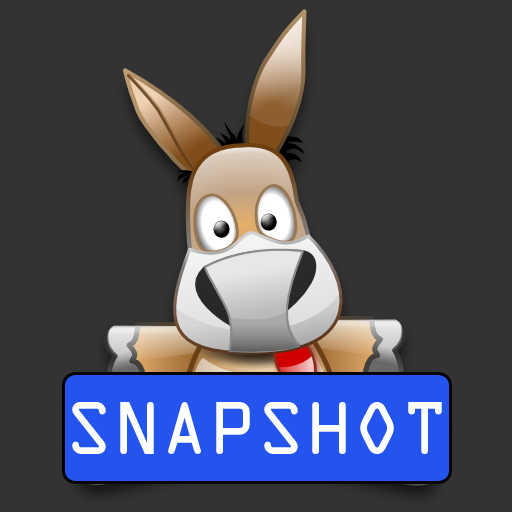
<style>
.page{position:relative;width:512px;height:512px;background:#333333}
.page>*{position:absolute;margin:0}
.t1{font:66.7px "OCRAStd";color:#fefefe}
</style>
<div class="page">
<p class="t1" style="left:72px;top:402px;width:370px;height:52px">SNAPSHOT</p>
</div>
